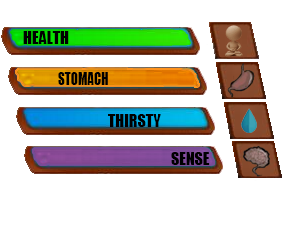
<style>
.page{position:relative;width:286px;height:250px;background:#ffffff}
.page>*{position:absolute;margin:0}
.t1{font:12px "Impact";color:#000000}
.t2{font:16px "Impact";color:#000000;scale:0.82 1}
.t3{font:15.9px "Impact";color:#000000;scale:0.82 1}
</style>
<div class="page">
<p class="t1" style="left:23px;top:31px;width:46px;height:13px">HEALTH</p>
<p class="t2" style="left:58px;top:72px;width:50px;height:13px"><span class="t3"><br></span>STOMACH</p>
<p class="t1" style="left:108px;top:114px;width:53px;height:13px">THIRSTY</p>
<p class="t1" style="left:171px;top:152px;width:39px;height:13px">SENSE</p>
</div>
